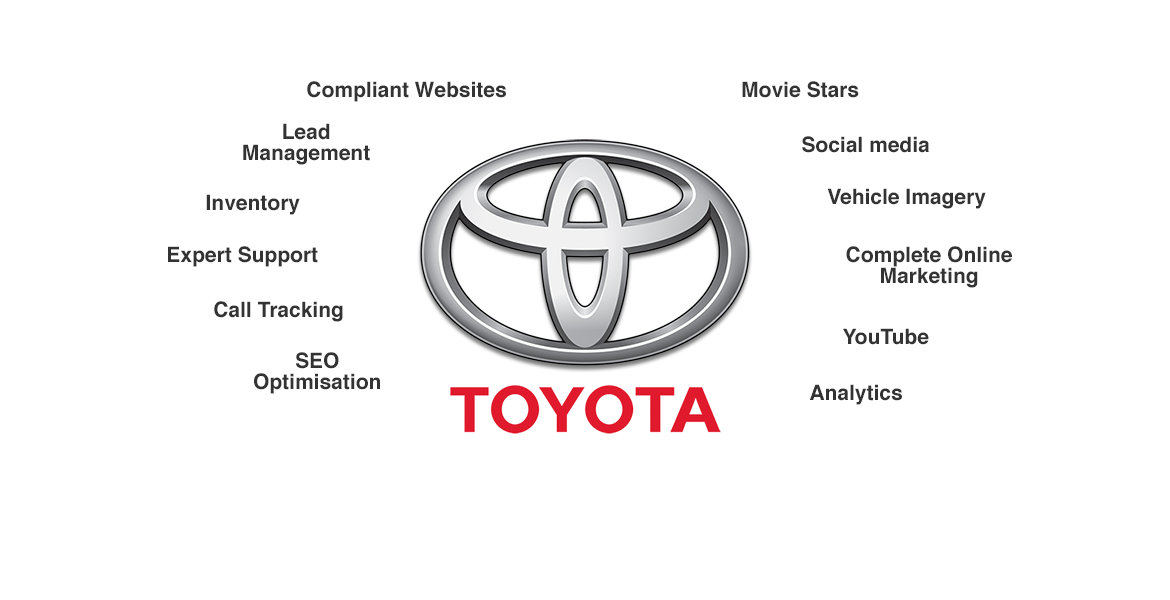
<style>
.page{position:relative;width:1170px;height:600px;background:#ffffff}
.page>*{position:absolute;margin:0}
.t1{font:21px "Helvetica-Bold";color:#333333}
.t2{font:21px/21px "Helvetica-Bold";color:#333333}
</style>
<div class="page">
<p class="t1" style="left:307px;top:81px;width:199px;height:21px">Compliant Websites</p>
<p class="t1" style="left:742px;top:81px;width:117px;height:17px">Movie Stars</p>
<p class="t2" style="left:243px;top:123px;width:127px;height:42px;text-align:center">Lead Management</p>
<p class="t1" style="left:802px;top:136px;width:127px;height:17px">Social media</p>
<p class="t1" style="left:206px;top:194px;width:94px;height:21px">Inventory</p>
<p class="t1" style="left:827px;top:188px;width:159px;height:21px">Vehicle Imagery</p>
<p class="t1" style="left:168px;top:246px;width:150px;height:21px">Expert Support</p>
<p class="t2" style="left:846px;top:246px;width:166px;height:42px;text-align:center">Complete Online Marketing</p>
<p class="t1" style="left:214px;top:301px;width:129px;height:21px">Call Tracking</p>
<p class="t1" style="left:843px;top:328px;width:86px;height:17px">YouTube</p>
<p class="t2" style="left:254px;top:352px;width:126px;height:42px;text-align:center">SEO Optimisation</p>
<p class="t1" style="left:809px;top:384px;width:93px;height:21px">Analytics</p>
</div>
